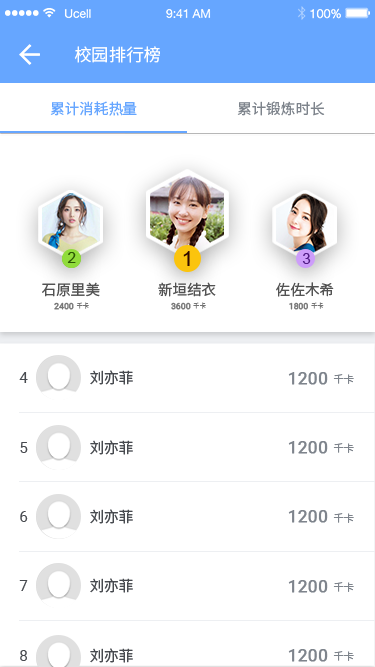
<style>
.page{position:relative;width:375px;height:667px;background:#ffffff}
.page>*{position:absolute;margin:0}
.t1{font:17.3px "NotoSansHans-Regular";color:#ffffff}
.t2{font:14.6px "NotoSansHans-Regular";color:#66a6ff}
.t3{font:14.6px "NotoSansHans-Regular";color:#7e848c}
.t4{font:14.6px "ArialMT";color:#2b5603}
.t5{font:20.5px "ArialMT";color:#2e0900}
.t6{font:14.6px "ArialMT";color:#521d85}
.t7{font:14.6px "NotoSansHans-Regular";color:#535353}
.t8{font:8.6px "Roboto-Regular";color:#757575;font-weight:bold}
.t9{font:6.2px "NotoSansHans-Regular";color:#757575}
.t10{font:14.6px "Roboto-Regular";color:#474a4f}
.t11{font:14.6px "NotoSansHans-Regular";color:#474a4f}
.t12{font:17.2px "Roboto-Regular";color:#7e848c;font-weight:bold}
.t13{font:10.3px "NotoSansHans-Regular";color:#7e848c}
</style>
<div class="page">
<p class="t1" style="left:74px;top:46px;width:86px;height:17px">校园排行榜</p>
<p class="t2" style="left:50px;top:101px;width:87px;height:15px">累计消耗热量</p>
<p class="t3" style="left:237px;top:101px;width:88px;height:15px">累计锻炼时长</p>
<p class="t4" style="left:67px;top:252px;width:9px;height:11px">2</p>
<p class="t5" style="left:183px;top:251px;width:7px;height:15px">1</p>
<p class="t6" style="left:302px;top:253px;width:9px;height:11px">3</p>
<p class="t7" style="left:42px;top:282px;width:58px;height:15px">石原里美</p>
<p class="t7" style="left:158px;top:282px;width:58px;height:15px">新垣结衣</p>
<p class="t7" style="left:276px;top:282px;width:58px;height:15px">佐佐木希</p>
<p class="t8" style="left:54px;top:302px;width:20px;height:8px">2400</p>
<p class="t9" style="left:76px;top:302px;width:13px;height:7px">千卡</p>
<p class="t8" style="left:171px;top:302px;width:20px;height:8px">3600</p>
<p class="t9" style="left:193px;top:302px;width:13px;height:7px">千卡</p>
<p class="t8" style="left:289px;top:302px;width:19px;height:8px">1800</p>
<p class="t9" style="left:311px;top:302px;width:13px;height:7px">千卡</p>
<p class="t10" style="left:19px;top:372px;width:9px;height:11px">4</p>
<p class="t11" style="left:90px;top:370px;width:43px;height:15px">刘亦菲</p>
<p class="t12" style="left:288px;top:372px;width:40px;height:13px">1200</p>
<p class="t13" style="left:333px;top:374px;width:21px;height:10px">千卡</p>
<p class="t10" style="left:20px;top:442px;width:8px;height:11px">5</p>
<p class="t11" style="left:90px;top:440px;width:43px;height:15px">刘亦菲</p>
<p class="t12" style="left:288px;top:441px;width:40px;height:13px">1200</p>
<p class="t13" style="left:333px;top:443px;width:21px;height:10px">千卡</p>
<p class="t11" style="left:90px;top:509px;width:43px;height:15px">刘亦菲</p>
<p class="t12" style="left:288px;top:510px;width:40px;height:13px">1200</p>
<p class="t10" style="left:20px;top:511px;width:8px;height:11px">6</p>
<p class="t13" style="left:333px;top:513px;width:21px;height:10px">千卡</p>
<p class="t10" style="left:19px;top:580px;width:9px;height:11px">7</p>
<p class="t11" style="left:90px;top:578px;width:43px;height:15px">刘亦菲</p>
<p class="t12" style="left:288px;top:580px;width:40px;height:13px">1200</p>
<p class="t13" style="left:333px;top:582px;width:21px;height:10px">千卡</p>
<p class="t10" style="left:20px;top:650px;width:7px;height:11px">8</p>
<p class="t11" style="left:90px;top:648px;width:43px;height:15px">刘亦菲</p>
<p class="t12" style="left:288px;top:649px;width:40px;height:13px">1200</p>
<p class="t13" style="left:333px;top:651px;width:21px;height:10px">千卡</p>
</div>
